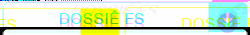
<style>
.page{position:relative;width:250px;height:35px;background:#fefefe}
.page>*{position:absolute;margin:0}
.t1{font:15.1px "HelveticaNeue";letter-spacing:0.05em}
</style>
<div class="page">
<p class="t1" style="left:60px;top:10px;width:84px;height:14px">DOSSIÊ FS</p>
</div>
